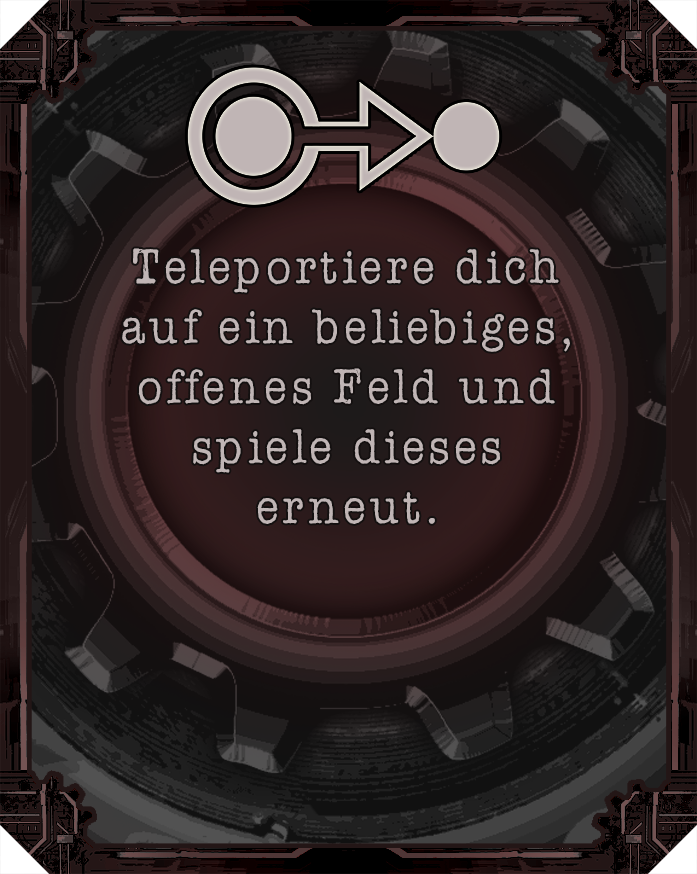
<style>
.page{position:relative;width:697px;height:874px}
.page>*{position:absolute;margin:0}
.t1{font:50px "AmerTypewriterITCbyBT-Medium";letter-spacing:0.02em;color:#c0b5b5}
</style>
<div class="page">
<p class="t1" style="left:122px;top:248px;width:448px;height:276px;text-align:center">Teleportiere dich<br>auf ein beliebiges, offenes Feld und spiele dieses erneut.</p>
</div>
